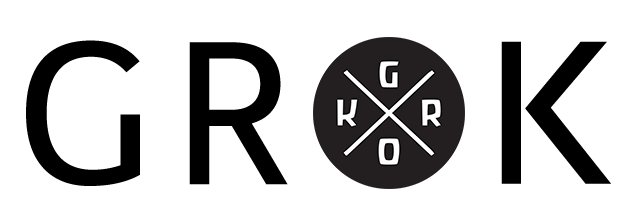
<style>
.page{position:relative;width:636px;height:218px;background:#ffffff}
.page>*{position:absolute;margin:0}
.t1{font:200px "Telex-Regular";letter-spacing:0.09em;color:#000000;text-transform:uppercase}
.t2{font:200px "Telex-Regular";letter-spacing:0.12em;color:#000000;text-transform:uppercase}
</style>
<div class="page">
<p class="t1" style="left:26px;top:40px;width:262px;height:146px">GR</p>
<p class="t2" style="left:501px;top:41px;width:110px;height:143px">K</p>
</div>
